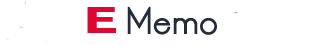
<style>
.page{position:relative;width:312px;height:46px;background:#ffffff}
.page>*{position:absolute;margin:0}
.t1{font:30px "LTOksana-Bold";color:#242c36}
.t2{font:37.5px "Ubuntu-Bold";color:#da0833;scale:1.54 1}
</style>
<div class="page">
<p class="t1" style="left:127px;top:6px;width:90px;height:29px">Memo</p>
<p class="t2" style="left:87px;top:7px;width:29px;height:26px">E</p>
</div>
